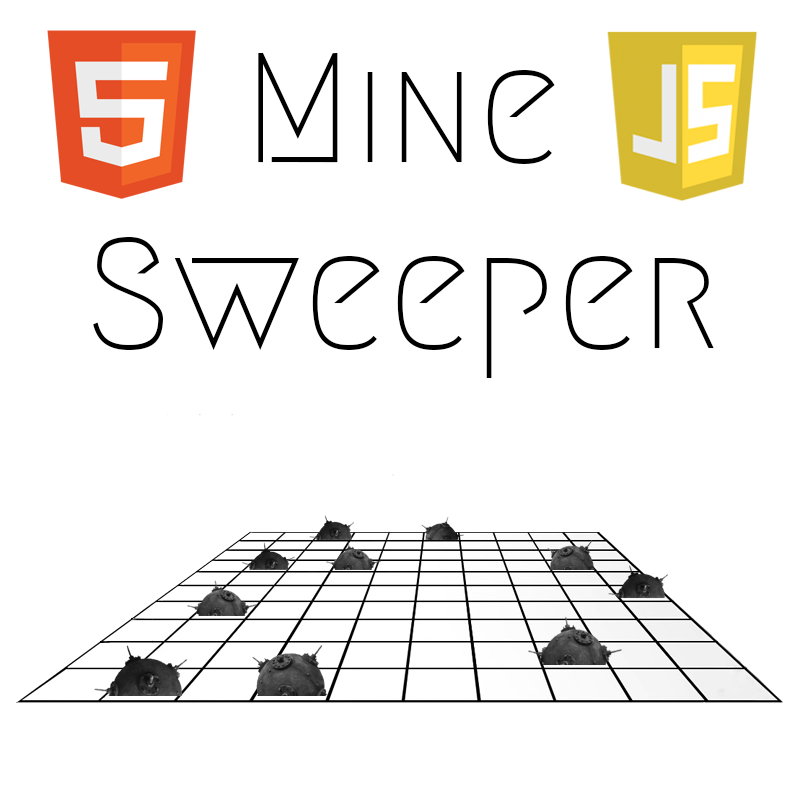
<style>
.page{position:relative;width:800px;height:800px;background:#ffffff}
.page>*{position:absolute;margin:0}
.t1{font:155.3px "Megrim";color:#000000}
</style>
<div class="page">
<p class="t1" style="left:93px;top:53px;width:621px;height:325px;text-align:center">Mine<br>Sweeper</p>
</div>
